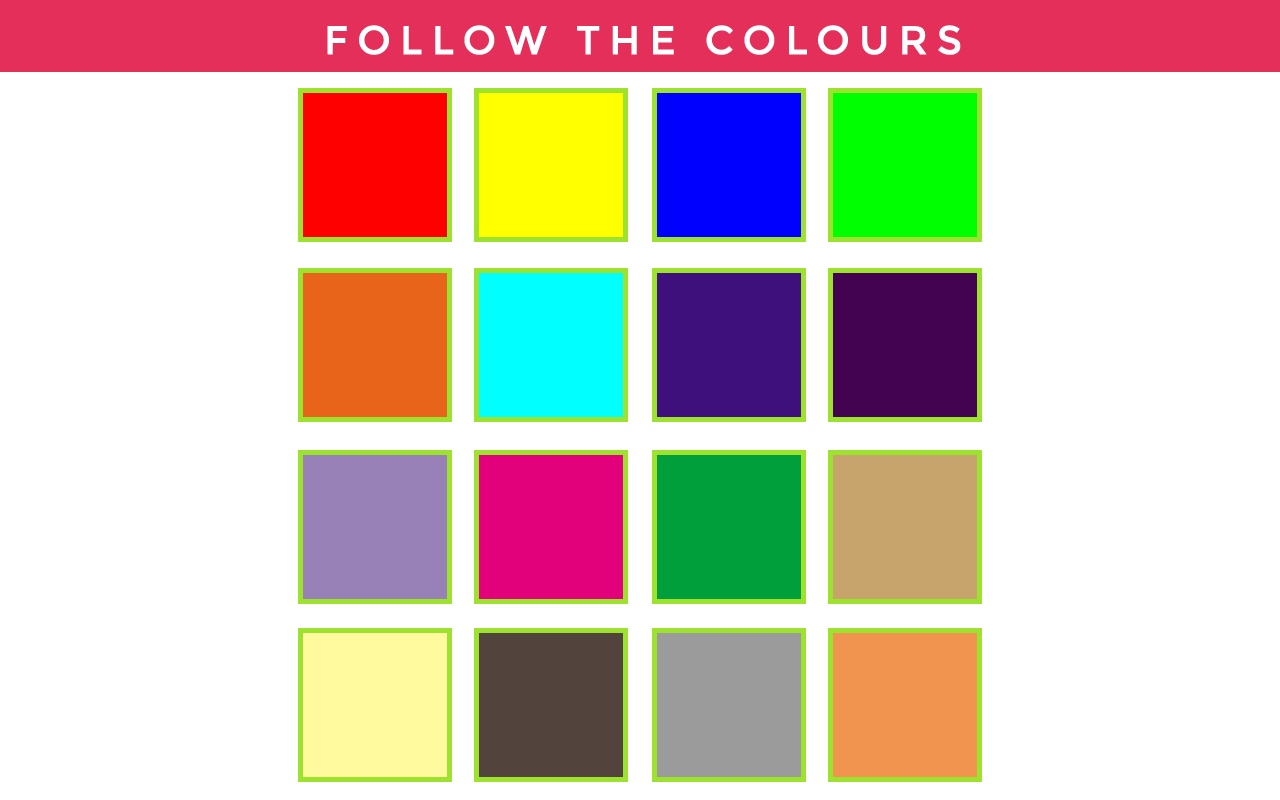
<style>
.page{position:relative;width:1280px;height:800px;background:#ffffff}
.page>*{position:absolute;margin:0}
.t1{font:40px "Montserrat-Regular";letter-spacing:0.2em;color:#ffffff;text-transform:uppercase;font-weight:bold}
</style>
<div class="page">
<p class="t1" style="left:327px;top:25px;width:634px;height:30px">Follow The Colours</p>
</div>
